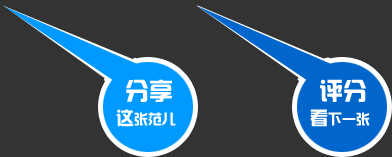
<style>
.page{position:relative;width:392px;height:157px;background:#333333}
.page>*{position:absolute;margin:0}
.t1{font:14px/30px "¹ã½Ý¾ÓÃÔÄã×Ö¿â";color:#ffffff}
.t2{font:18px/30px "¹ã½Ý¾ÓÃÔÄã×Ö¿â";color:#ffffff}
.t3{font:24px/30px "¹ã½Ý¾ÓÃÔÄã×Ö¿â";color:#ffffff}
</style>
<div class="page">
<p class="t1" style="left:116px;top:79px;width:60px;height:48px"><span class="t2"> </span><span class="t3">分享<br></span><span class="t2">这</span>张范儿</p>
<p class="t1" style="left:310px;top:79px;width:60px;height:48px"><span class="t2"> </span><span class="t3">评分<br></span><span class="t2">看</span>下一张</p>
</div>
